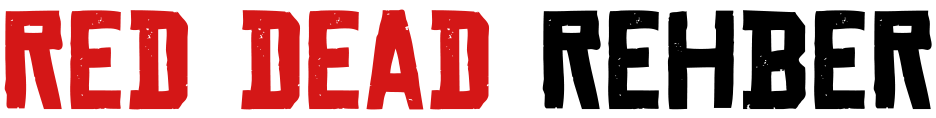
<style>
.page{position:relative;width:936px;height:118px;background:#ffffff}
.page>*{position:absolute;margin:0}
.t1{font:137.5px "Redemption";color:#d41717}
.t2{font:137.5px "Redemption";color:#000000}
</style>
<div class="page">
<p class="t1" style="left:4px;top:9px;width:928px;height:101px">RED DEAD<span class="t2"> REHBER</span></p>
</div>
